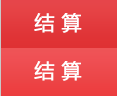
<style>
.page{position:relative;width:117px;height:96px}
.page>*{position:absolute;margin:0}
.t1{font:20px "MicrosoftYaHei";color:#ffffff;font-weight:bold}
</style>
<div class="page">
<p class="t1" style="left:34px;top:13px;width:48px;height:20px">结 算</p>
<p class="t1" style="left:34px;top:61px;width:48px;height:20px">结 算</p>
</div>
